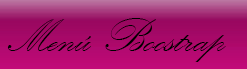
<style>
.page{position:relative;width:247px;height:69px}
.page>*{position:absolute;margin:0}
.t1{font:48px "KunstlerScript";color:#000000}
</style>
<div class="page">
<p class="t1" style="left:7px;top:18px;width:219px;height:44px">Menú Boostrap</p>
</div>
